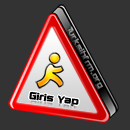
<style>
.page{position:relative;width:130px;height:130px;background:#333333}
.page>*{position:absolute;margin:0}
.t1{font:9.6px "TRKimberley";color:#000000;scale:1.25 1}
</style>
<div class="page">
<p class="t1" style="left:29px;top:91px;width:50px;height:16px;rotate:7deg">Giris Yap</p>
</div>
